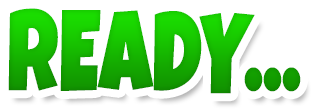
<style>
.page{position:relative;width:311px;height:109px;background:#ffffff}
.page>*{position:absolute;margin:0}
.t1{font:115px "LuckiestGuy-Regular";text-transform:uppercase;scale:0.74 1}
</style>
<div class="page">
<p class="t1" style="left:8px;top:8px;width:293px;height:86px">ready...</p>
</div>
